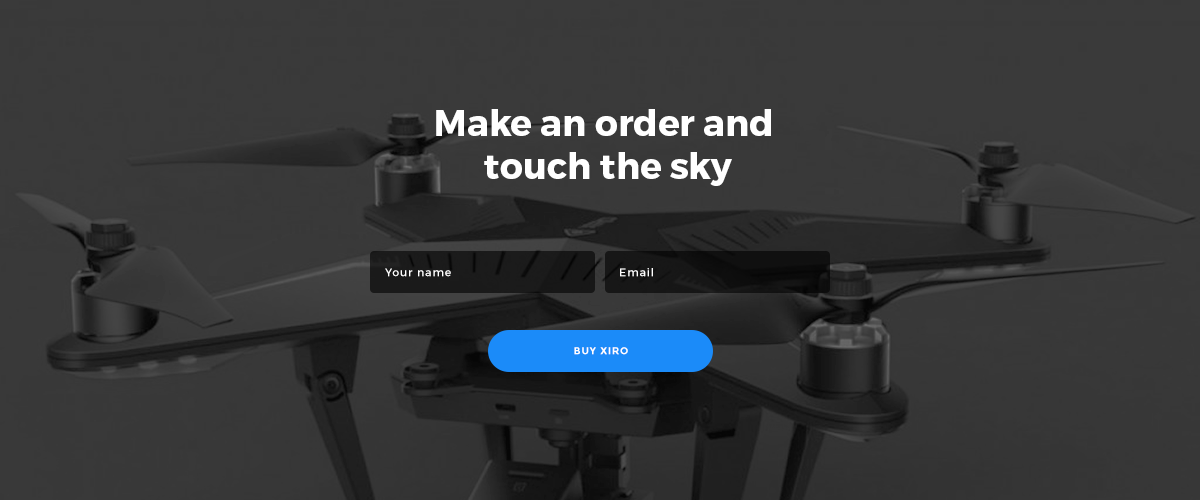
<style>
.page{position:relative;width:1200px;height:500px;background:#3a3a3a}
.page>*{position:absolute;margin:0}
.t1{font:36px "Montserrat-Bold";color:#ffffff}
.t2{font:11px "Montserrat-Regular";letter-spacing:0.08em;color:#ffffff}
.t3{font:10px "Montserrat-Bold";letter-spacing:0.08em;color:#ffffff;text-transform:uppercase}
</style>
<div class="page">
<p class="t1" style="left:436px;top:109px;width:335px;height:77px;text-align:center">Make an order and<br> touch the sky</p>
<p class="t2" style="left:385px;top:268px;width:66px;height:9px">Your name</p>
<p class="t2" style="left:620px;top:268px;width:33px;height:9px">Email</p>
<p class="t3" style="left:574px;top:347px;width:54px;height:8px">buy xiro</p>
</div>
